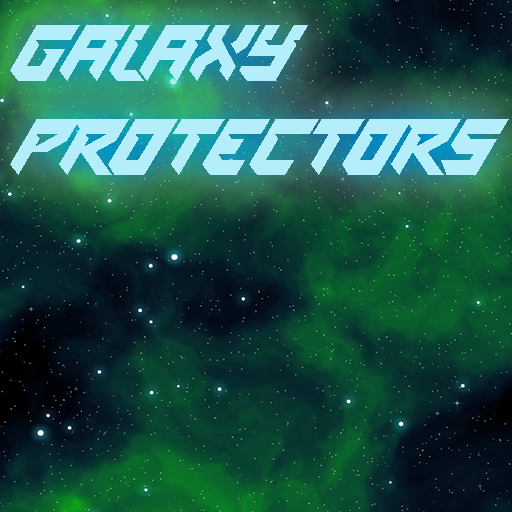
<style>
.page{position:relative;width:512px;height:512px}
.page>*{position:absolute;margin:0}
.t1{font:78.1px "SPACEMISSION";color:#b4eefb}
</style>
<div class="page">
<p class="t1" style="left:10px;top:25px;width:499px;height:150px">GALAXY<br>PROTECTORS</p>
</div>
